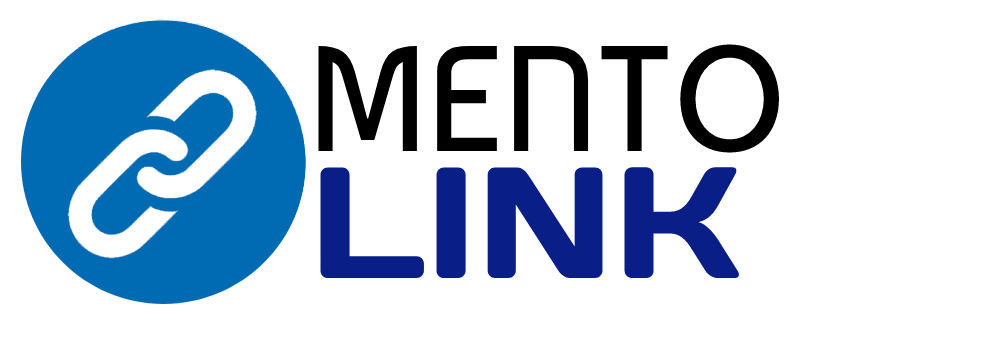
<style>
.page{position:relative;width:1000px;height:350px;background:#ffffff}
.page>*{position:absolute;margin:0}
.t1{font:150px "Baumans-Regular";color:#000000}
.t2{font:157.9px "Days";color:#091e87}
</style>
<div class="page">
<p class="t1" style="left:318px;top:44px;width:461px;height:109px">MENTO</p>
<p class="t2" style="left:320px;top:167px;width:419px;height:111px">LINK</p>
</div>
